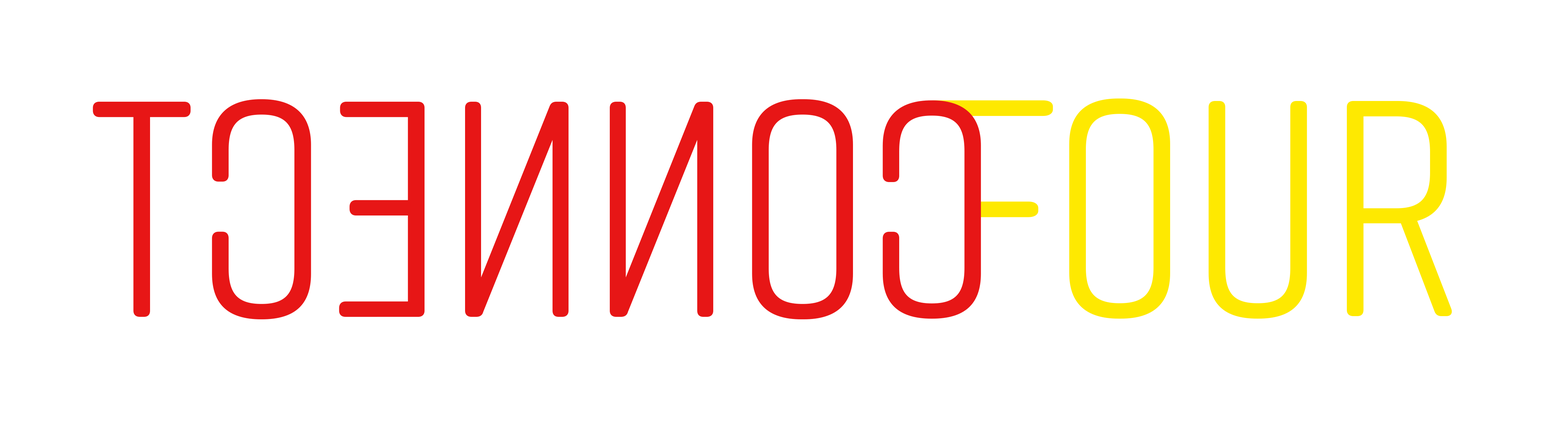
<style>
.page{position:relative;width:1568px;height:426px;background:#ffffff}
.page>*{position:absolute;margin:0}
.t1{font:307.1px "RiftSoft-Regular";color:#e71616}
.t2{font:307.1px "RiftSoft-Regular";color:#fee901}
</style>
<div class="page">
<p class="t1" style="left:93px;top:99px;width:760px;height:220px;rotate:180deg">ONNECT</p>
<p class="t2" style="left:1069px;top:98px;width:383px;height:221px">OUR</p>
</div>
